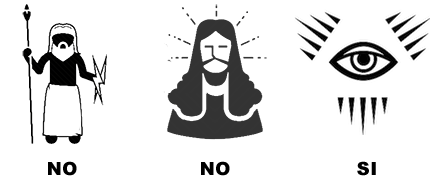
<style>
.page{position:relative;width:430px;height:179px;background:#ffffff}
.page>*{position:absolute;margin:0}
.t1{font:18px "Arial-Black";letter-spacing:0.02em;color:#000000}
</style>
<div class="page">
<p class="t1" style="left:48px;top:161px;width:29px;height:15px">NO</p>
<p class="t1" style="left:201px;top:161px;width:29px;height:15px">NO</p>
<p class="t1" style="left:357px;top:161px;width:19px;height:15px">SI</p>
</div>
